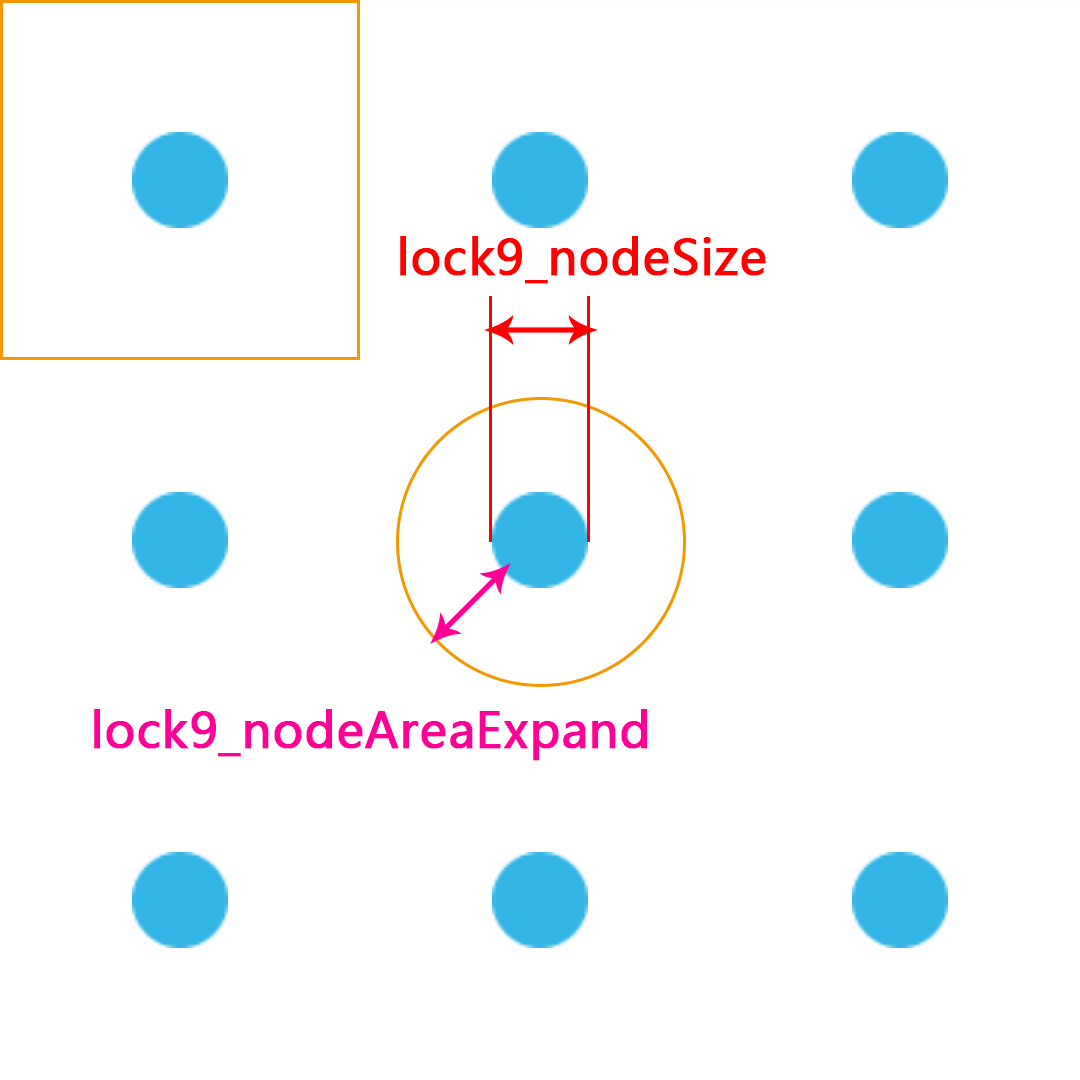
<style>
.page{position:relative;width:1080px;height:1080px;background:#ffffff}
.page>*{position:absolute;margin:0}
.t1{font:48px "MicrosoftYaHei";color:#ff0000;font-weight:bold}
.t2{font:48px "MicrosoftYaHei";color:#ff0096;font-weight:bold}
</style>
<div class="page">
<p class="t1" style="left:400px;top:236px;width:366px;height:48px">lock9_nodeSize</p>
<p class="t2" style="left:94px;top:709px;width:553px;height:52px">lock9_nodeAreaExpand</p>
</div>
